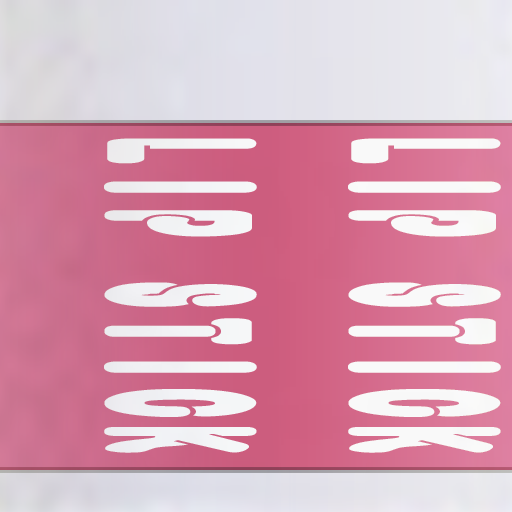
<style>
.page{position:relative;width:512px;height:512px}
.page>*{position:absolute;margin:0}
.t1{font:204px "OvlapblackEG-Heavy-SJIS";color:#ffffff;scale:0.35 1}
</style>
<div class="page">
<p class="t1" style="left:104px;top:138px;width:153px;height:315px;rotate:90deg">LIP STICK</p>
<p class="t1" style="left:348px;top:138px;width:153px;height:315px;rotate:90deg">LIP STICK</p>
</div>
